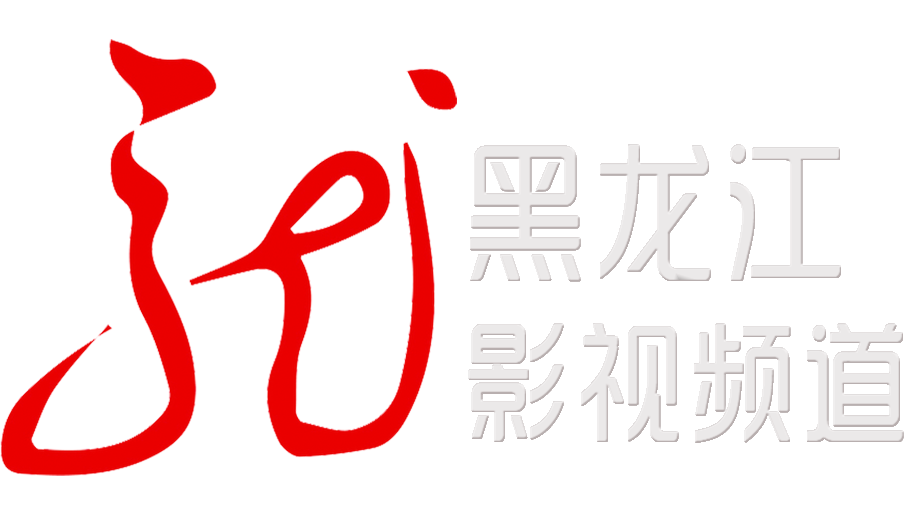
<style>
.page{position:relative;width:910px;height:512px;background:#ffffff}
.page>*{position:absolute;margin:0}
.t1{font:150px/180px "SJyunlvyuan";letter-spacing:0.02em;color:#ebe9e9;scale:0.85 1}
.t2{font:130px/180px "SJyunlvyuan";letter-spacing:0.02em;color:#ebe9e9;scale:0.85 1}
.t3{font:130px "SJyunlvyuan";letter-spacing:0.02em;color:#ebe9e9;scale:0.85 1}
</style>
<div class="page">
<p class="t1" style="left:468px;top:144px;width:436px;height:299px">黑龙江<br><span class="t2">影视频</span><span class="t3">道</span></p>
</div>
